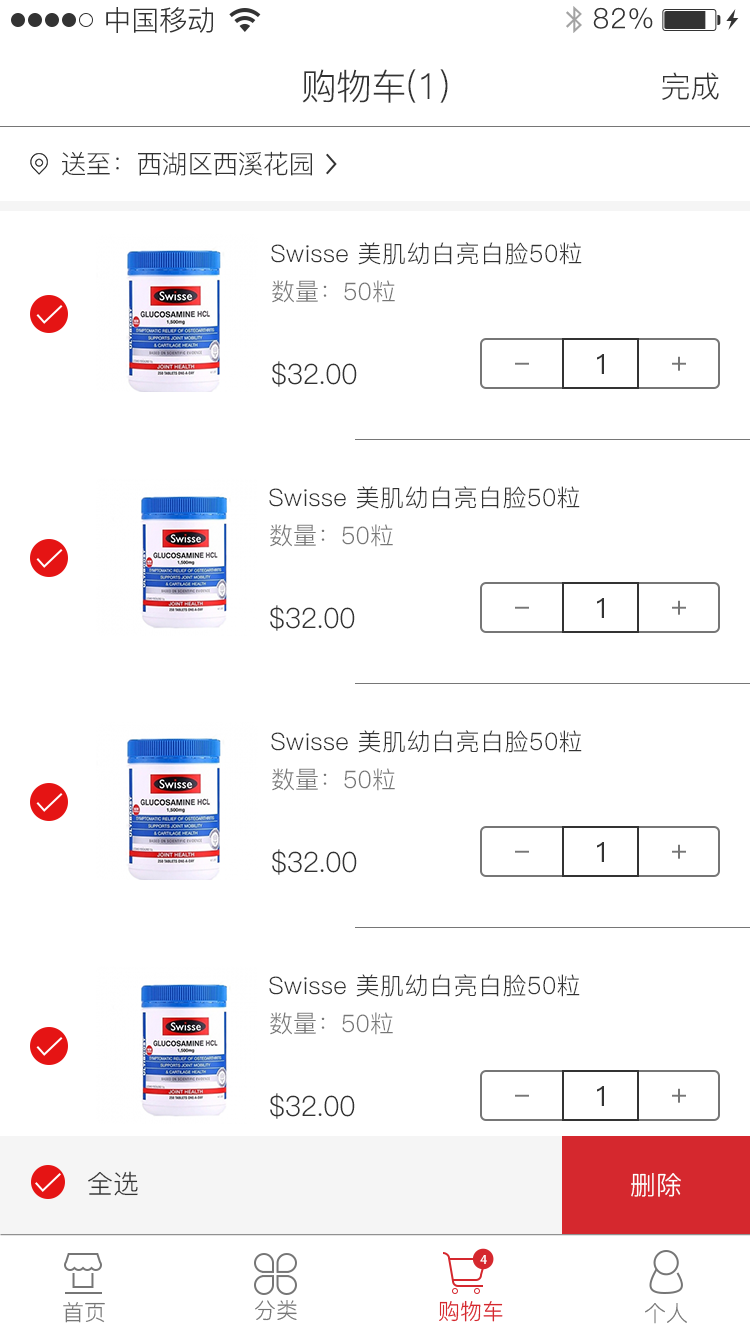
<style>
.page{position:relative;width:750px;height:1334px;background:#ffffff}
.page>*{position:absolute;margin:0}
.t1{font:28px "PingFang-SC-Regular";color:#333333}
.t2{font:28px "PingFang-SC-Regular";letter-spacing:0.025em;color:#333333}
.t3{font:36px "PingFang-SC-Regular";letter-spacing:-0.025em;color:#333333}
.t4{font:30px "PingFang-SC-Regular";letter-spacing:-0.025em;color:#333333}
.t5{font:26px "PingFang-SC-Regular";letter-spacing:-0.025em;color:#333333}
.t6{font:24px "PingFang-SC-Regular";letter-spacing:0.02em;color:#333333}
.t7{font:24px "PingFang-SC-Regular";color:#767676}
.t8{font:28px "PingFang-SC-Regular";letter-spacing:-0.025em;color:#333333}
.t9{font:28px "PingFang-SC-Medium";letter-spacing:-0.025em;color:#767676}
.t10{font:28px "PingFang-SC-Medium";letter-spacing:-0.025em;color:#333333}
.t11{font:26px "PingFang-SC-Regular";color:#333333}
.t12{font:26px "PingFang-SC-Regular";color:#ffffff}
.t13{font:12px "AdobeHeitiStd-Regular";color:#ffffff}
.t14{font:22px "PingFang-SC-Regular";color:#767676}
.t15{font:22px "PingFang-SC-Regular";color:#d5282e}
</style>
<div class="page">
<p class="t1" style="left:106px;top:7px;width:107px;height:26px">中国移动</p>
<p class="t2" style="left:593px;top:7px;width:60px;height:22px">82%</p>
<p class="t3" style="left:302px;top:69px;width:146px;height:34px">购物车(1)</p>
<p class="t4" style="left:662px;top:72px;width:57px;height:28px">完成</p>
<p class="t5" style="left:62px;top:151px;width:250px;height:25px">送至：西湖区西溪花园</p>
<p class="t6" style="left:271px;top:242px;width:311px;height:23px">Swisse 美肌幼白亮白脸50粒</p>
<p class="t7" style="left:272px;top:280px;width:123px;height:23px">数量：50粒</p>
<p class="t8" style="left:272px;top:361px;width:85px;height:26px">$32.00</p>
<p class="t9" style="left:515px;top:362px;width:14px;height:3px">-</p>
<p class="t10" style="left:597px;top:354px;width:7px;height:20px">1</p>
<p class="t9" style="left:672px;top:356px;width:14px;height:15px">+</p>
<p class="t6" style="left:269px;top:486px;width:311px;height:23px">Swisse 美肌幼白亮白脸50粒</p>
<p class="t7" style="left:270px;top:524px;width:123px;height:23px">数量：50粒</p>
<p class="t8" style="left:270px;top:605px;width:85px;height:26px">$32.00</p>
<p class="t9" style="left:515px;top:606px;width:14px;height:3px">-</p>
<p class="t10" style="left:597px;top:598px;width:7px;height:20px">1</p>
<p class="t9" style="left:672px;top:600px;width:14px;height:15px">+</p>
<p class="t6" style="left:271px;top:730px;width:311px;height:23px">Swisse 美肌幼白亮白脸50粒</p>
<p class="t7" style="left:272px;top:768px;width:123px;height:23px">数量：50粒</p>
<p class="t10" style="left:597px;top:842px;width:7px;height:20px">1</p>
<p class="t9" style="left:672px;top:844px;width:14px;height:15px">+</p>
<p class="t8" style="left:272px;top:849px;width:85px;height:26px">$32.00</p>
<p class="t9" style="left:515px;top:850px;width:14px;height:3px">-</p>
<p class="t6" style="left:269px;top:974px;width:311px;height:23px">Swisse 美肌幼白亮白脸50粒</p>
<p class="t7" style="left:270px;top:1012px;width:123px;height:23px">数量：50粒</p>
<p class="t10" style="left:597px;top:1086px;width:7px;height:20px">1</p>
<p class="t8" style="left:270px;top:1093px;width:85px;height:26px">$32.00</p>
<p class="t9" style="left:515px;top:1094px;width:14px;height:3px">-</p>
<p class="t9" style="left:672px;top:1088px;width:14px;height:15px">+</p>
<p class="t11" style="left:88px;top:1171px;width:50px;height:25px">全选</p>
<p class="t12" style="left:631px;top:1173px;width:50px;height:24px">删除</p>
<p class="t13" style="left:480px;top:1255px;width:7px;height:9px">4</p>
<p class="t14" style="left:63px;top:1302px;width:42px;height:21px">首页</p>
<p class="t14" style="left:255px;top:1300px;width:42px;height:21px">分类</p>
<p class="t15" style="left:439px;top:1300px;width:64px;height:22px">购物车</p>
<p class="t14" style="left:645px;top:1303px;width:42px;height:21px">个人</p>
</div>
